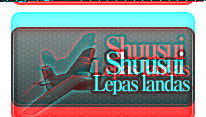
<style>
.page{position:relative;width:206px;height:117px}
.page>*{position:absolute;margin:0}
.t1{font:30px "RyuminPro-ExBold";letter-spacing:-0.1em;scale:0.9 1}
.t2{font:22px "RyuminPro-ExBold";letter-spacing:-0.1em;scale:0.9 1}
</style>
<div class="page">
<p class="t1" style="left:106px;top:35px;width:79px;height:24px">Shuusui</p>
<p class="t2" style="left:93px;top:58px;width:97px;height:21px">Lepas landas</p>
</div>
